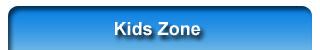
<style>
.page{position:relative;width:320px;height:50px}
.page>*{position:absolute;margin:0}
.t1{font:18px "MS Dialog";color:#ffffff}
</style>
<div class="page">
<p class="t1" style="left:115px;top:22px;width:86px;height:14px">Kids Zone</p>
</div>
